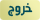
<style>
.page{position:relative;width:40px;height:20px}
.page>*{position:absolute;margin:0}
.t1{font:14px "Mj_BeirutMd";letter-spacing:-0.001em;color:#014958}
</style>
<div class="page">
<p class="t1" style="left:8px;top:3px;width:25px;height:14px">خروج</p>
</div>
